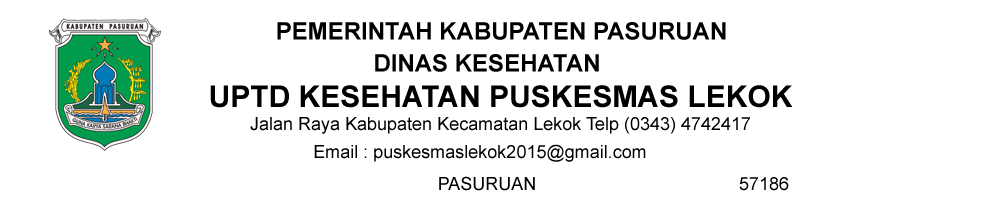
<style>
.page{position:relative;width:1001px;height:201px;background:#ffffff}
.page>*{position:absolute;margin:0}
.t1{font:24px "Arial-BoldMT";color:#000000}
.t2{font:30px "Arial-BoldMT";color:#000000}
.t3{font:18px "ArialMT";color:#000000}
</style>
<div class="page">
<p class="t1" style="left:277px;top:22px;width:449px;height:18px">PEMERINTAH KABUPATEN PASURUAN</p>
<p class="t1" style="left:375px;top:54px;width:224px;height:18px">DINAS KESEHATAN</p>
<p class="t2" style="left:210px;top:85px;width:583px;height:23px">UPTD KESEHATAN PUSKESMAS LEKOK</p>
<p class="t3" style="left:250px;top:117px;width:500px;height:17px">Jalan Raya Kabupaten Kecamatan Lekok Telp (0343) 4742417</p>
<p class="t3" style="left:314px;top:144px;width:332px;height:18px">Email : puskesmaslekok2015@gmail.com</p>
<p class="t3" style="left:439px;top:176px;width:96px;height:15px">PASURUAN</p>
<p class="t3" style="left:739px;top:177px;width:50px;height:14px">57186</p>
</div>
